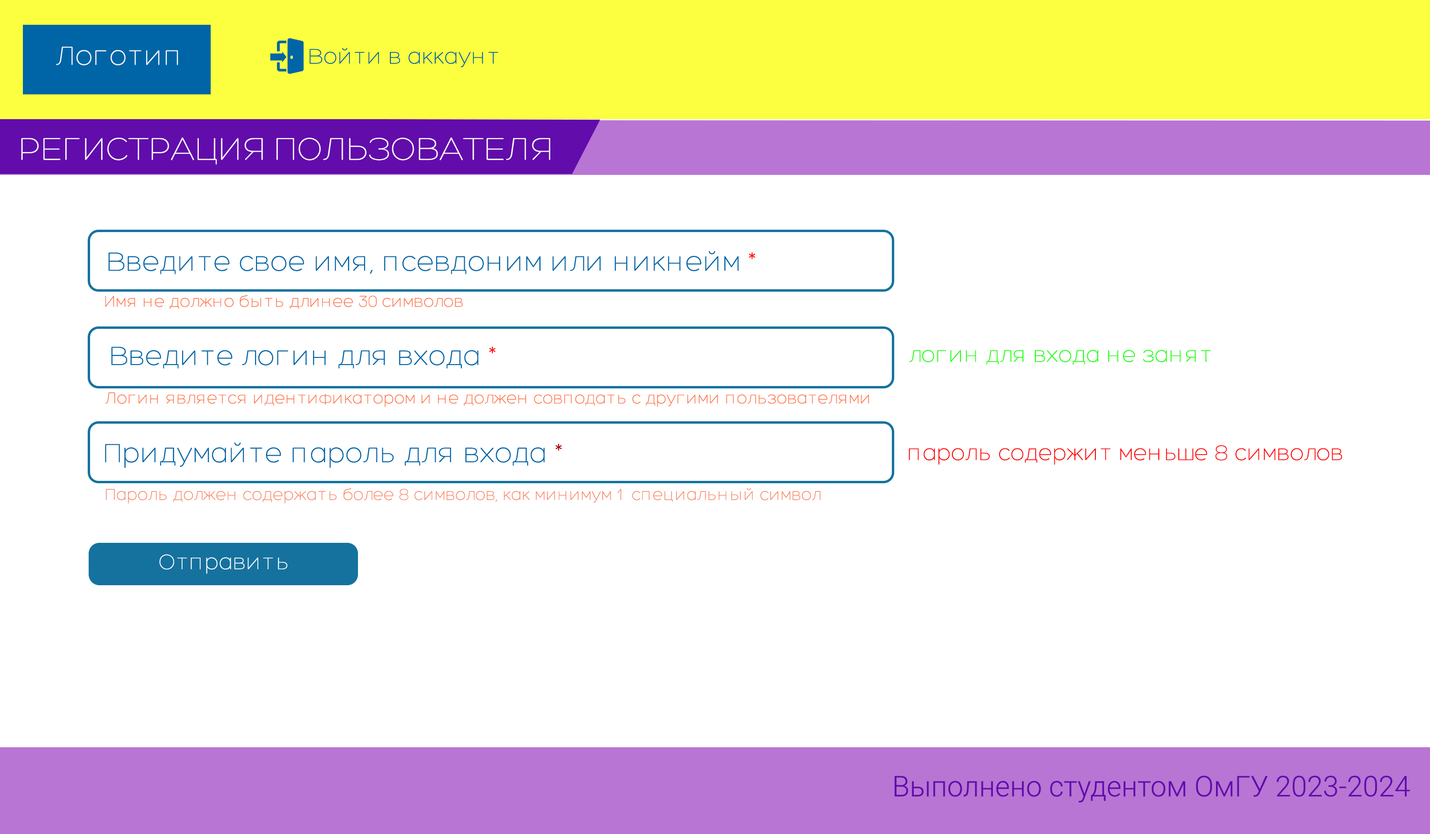
<style>
.page{position:relative;width:1430px;height:834px;background:#ffffff}
.page>*{position:absolute;margin:0}
.t1{font:28.6px "Hero-Light";color:#ffffff}
.t2{font:22.9px "Hero-Light";color:#0065a6}
.t3{font:34.3px "Hero-Light";color:#ffffff}
.t4{font:28.6px "Hero-Light";color:#0065a6}
.t5{font:28.6px "Hero-Light";color:#ff0202}
.t6{font:17.2px "Hero-Light";color:#ff6e40}
.t7{font:28.6px "Hero-Light";color:#ff0909}
.t8{font:22.9px "Hero-Light";color:#1dff0c}
.t9{font:28.6px "Hero-Light";color:#a60000}
.t10{font:22.9px "Hero-Light";color:#fe0000}
.t11{font:17.2px "Hero-Light";color:#fa8461}
.t12{font:22.9px "Hero-Light";color:#ffffff}
.t13{font:28.6px "Roboto-Light";color:#620cac}
</style>
<div class="page">
<p class="t1" style="left:56px;top:47px;width:122px;height:18px">Логотип</p>
<p class="t2" style="left:309px;top:48px;width:190px;height:19px">Войти в аккаунт</p>
<p class="t3" style="left:21px;top:137px;width:529px;height:28px">РЕГИСТРАЦИЯ ПОЛЬЗОВАТЕЛЯ</p>
<p class="t4" style="left:108px;top:251px;width:647px;height:24px">Введите свое имя, псевдоним или никнейм <span class="t5">*</span></p>
<p class="t6" style="left:105px;top:295px;width:358px;height:14px">Имя не должно быть длинее 30 символов</p>
<p class="t4" style="left:111px;top:346px;width:385px;height:23px">Введите логин для входа<span class="t7"> *</span></p>
<p class="t8" style="left:909px;top:350px;width:302px;height:15px">логин для входа не занят</p>
<p class="t6" style="left:105px;top:392px;width:764px;height:15px">Логин является идентификатором и не должен совподать с другими пользователями</p>
<p class="t4" style="left:105px;top:442px;width:457px;height:26px">Придумайте пароль для входа <span class="t9">*</span></p>
<p class="t10" style="left:908px;top:445px;width:434px;height:20px">пароль содержит меньше 8 символов</p>
<p class="t11" style="left:106px;top:488px;width:715px;height:16px">Пароль должен содержать более 8 символов, как минимум 1  специальный символ</p>
<p class="t12" style="left:159px;top:554px;width:128px;height:20px">Отправить</p>
<p class="t13" style="left:894px;top:775px;width:516px;height:28px">Выполнено студентом ОмГУ 2023-2024</p>
</div>
